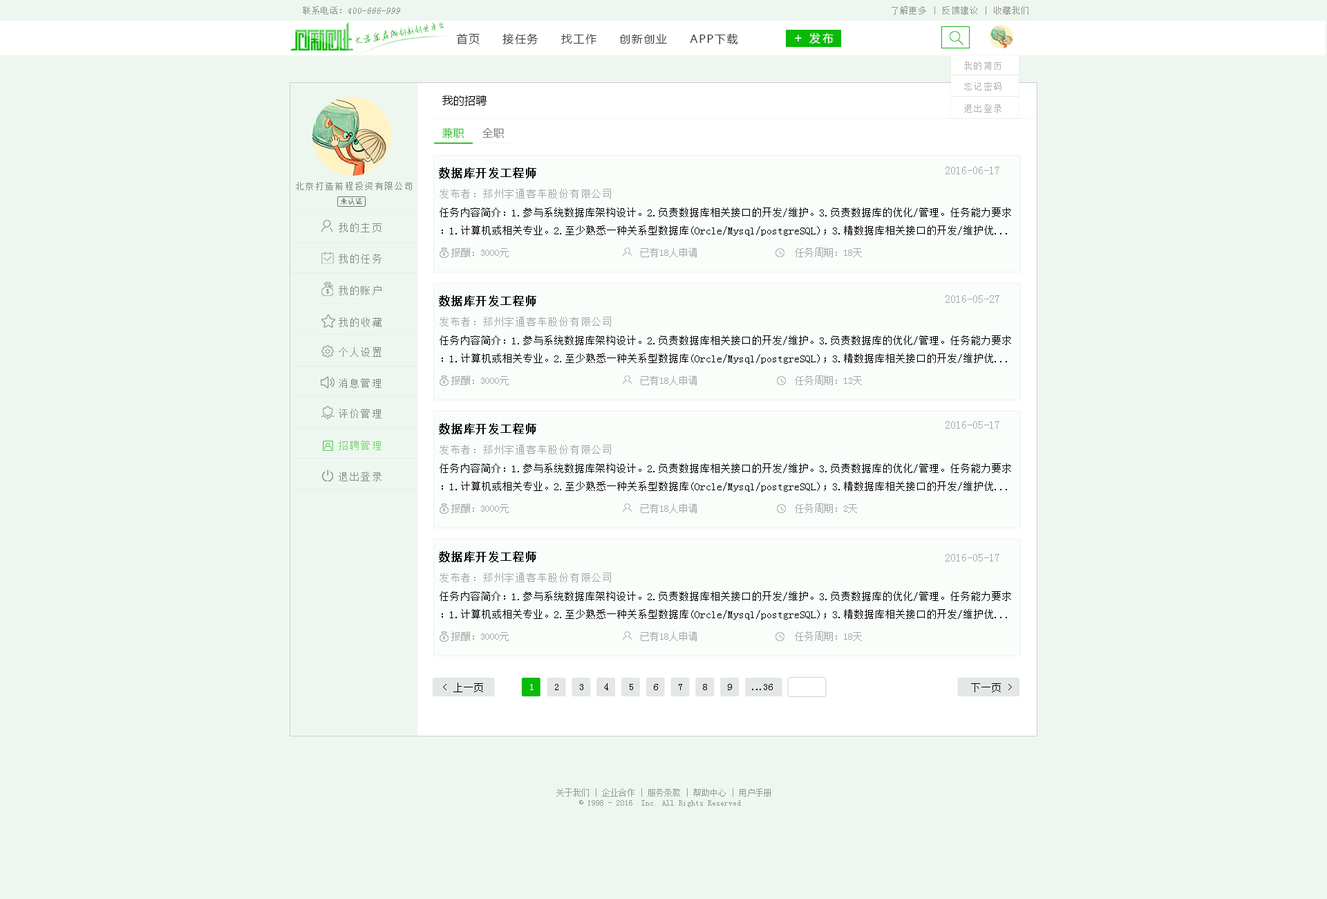
<style>
.page{position:relative;width:1327px;height:899px;background:#eef6f0}
.page>*{position:absolute;margin:0}
.t1{font:9.2px "SimSun";color:#959595;font-style:italic}
.t2{font:9.2px "SimSun";color:#959595}
.t3{font:8.3px "SimSun";letter-spacing:0.1em;color:#959494}
.t4{font:8.6px "AnJingCheng-Xing-2.0";letter-spacing:-0.01em;color:#09ba08}
.t5{font:9.6px "AnJingCheng-Xing-2.0";letter-spacing:-0.01em;color:#09ba08}
.t6{font:11.1px "MicrosoftYaHei";letter-spacing:0.1em;color:#3e3e3e}
.t7{font:12.9px "MicrosoftYaHei";letter-spacing:0.2em;color:#ffffff}
.t8{font:11.1px "MicrosoftYaHei";letter-spacing:0.2em;color:#ffffff}
.t9{font:9.2px "SimSun";letter-spacing:0.1em;color:#b2b2b2}
.t10{font:11.1px "MicrosoftYaHei";letter-spacing:0.01em;color:#000000}
.t11{font:11.1px "MicrosoftYaHei";letter-spacing:0.01em;color:#33c132}
.t12{font:11.1px "MicrosoftYaHei";letter-spacing:0.01em;color:#7e7e7e}
.t13{font:11.1px "SimSun";letter-spacing:0.05em;color:#030303;font-weight:bold}
.t14{font:11.1px "SimSun";color:#a4a4a4}
.t15{font:9.2px "SimSun";letter-spacing:0.1em;color:#888888}
.t16{font:7.4px "SimSun";color:#727472}
.t17{font:10.1px "SimSun";letter-spacing:0.05em;color:#a4a4a4}
.t18{font:10.1px "SimSun";color:#000000}
.t19{font:10.1px "SimSun";letter-spacing:0.1em;color:#888888}
.t20{font:9.7px "SimSun";color:#a4a4a4}
.t21{font:10.1px "SimSun";letter-spacing:0.1em;color:#7bd57b}
.t22{font:10px "SimSun";letter-spacing:0.05em;color:#000000}
.t23{font:10px "SimSun";letter-spacing:0.05em;color:#ffffff}
.t24{font:10px "SimSun";letter-spacing:-0.1em;color:#000000}
.t25{font:8.3px "SimSun";color:#999999}
</style>
<div class="page">
<p class="t1" style="left:303px;top:6px;width:97px;height:9px"><span class="t2">联系电话：</span>400-666-999</p>
<p class="t3" style="left:892px;top:6px;width:136px;height:9px">了解更多 | 反馈建议 | 收藏我们</p>
<p class="t4" style="left:355px;top:21px;width:89px;height:23px;rotate:-10deg"><span class="t5">大学生在线</span>创新创业平台</p>
<p class="t6" style="left:456px;top:33px;width:282px;height:12px">首页     接任务     找工作     创新创业     APP下载</p>
<p class="t7" style="left:795px;top:35px;width:7px;height:6px">+</p>
<p class="t8" style="left:809px;top:32px;width:25px;height:12px">发布</p>
<p class="t9" style="left:964px;top:62px;width:38px;height:8px">我的简历</p>
<p class="t9" style="left:964px;top:82px;width:38px;height:9px">忘记密码</p>
<p class="t10" style="left:442px;top:95px;width:45px;height:11px">我的招聘</p>
<p class="t9" style="left:964px;top:104px;width:38px;height:9px">退出登录</p>
<p class="t11" style="left:442px;top:127px;width:63px;height:12px">兼职     <span class="t12">全职</span></p>
<p class="t13" style="left:439px;top:167px;width:97px;height:11px">数据库开发工程师</p>
<p class="t14" style="left:946px;top:167px;width:53px;height:7px">2016-06-17</p>
<p class="t15" style="left:296px;top:182px;width:116px;height:8px">北京打造前程投资有限公司</p>
<p class="t16" style="left:341px;top:198px;width:21px;height:7px">未认证</p>
<p class="t17" style="left:440px;top:189px;width:171px;height:9px">发布者：郑州宇通客车股份有限公司</p>
<p class="t18" style="left:440px;top:207px;width:571px;height:29px">任务内容简介：1.参与系统数据库架构设计。2.负责数据库相关接口的开发/维护。3.负责数据库的优化/管理。任务能力要求<br>：1.计算机或相关专业。2.至少熟悉一种关系型数据库(Orcle/Mysql/postgreSQL)；3.精数据库相关接口的开发/维护优...</p>
<p class="t19" style="left:339px;top:223px;width:43px;height:9px">我的主页</p>
<p class="t19" style="left:339px;top:254px;width:43px;height:9px">我的任务</p>
<p class="t20" style="left:451px;top:247px;width:411px;height:10px">报酬：3000元                           已有18人申请                    任务周期：18天</p>
<p class="t19" style="left:339px;top:285px;width:43px;height:10px">我的账户</p>
<p class="t13" style="left:439px;top:295px;width:97px;height:11px">数据库开发工程师</p>
<p class="t14" style="left:946px;top:295px;width:53px;height:8px">2016-05-27</p>
<p class="t19" style="left:339px;top:317px;width:43px;height:10px">我的收藏</p>
<p class="t17" style="left:440px;top:317px;width:171px;height:9px">发布者：郑州宇通客车股份有限公司</p>
<p class="t18" style="left:440px;top:335px;width:571px;height:29px">任务内容简介：1.参与系统数据库架构设计。2.负责数据库相关接口的开发/维护。3.负责数据库的优化/管理。任务能力要求<br>：1.计算机或相关专业。2.至少熟悉一种关系型数据库(Orcle/Mysql/postgreSQL)；3.精数据库相关接口的开发/维护优...</p>
<p class="t19" style="left:339px;top:347px;width:43px;height:10px">个人设置</p>
<p class="t20" style="left:451px;top:375px;width:411px;height:10px">报酬：3000元                           已有18人申请                    任务周期：12天</p>
<p class="t19" style="left:339px;top:378px;width:43px;height:10px">消息管理</p>
<p class="t19" style="left:339px;top:408px;width:43px;height:10px">评价管理</p>
<p class="t13" style="left:439px;top:423px;width:97px;height:11px">数据库开发工程师</p>
<p class="t14" style="left:946px;top:421px;width:53px;height:8px">2016-05-17</p>
<p class="t21" style="left:339px;top:440px;width:43px;height:10px">招聘管理</p>
<p class="t17" style="left:440px;top:444px;width:171px;height:10px">发布者：郑州宇通客车股份有限公司</p>
<p class="t19" style="left:339px;top:471px;width:43px;height:10px">退出登录</p>
<p class="t18" style="left:440px;top:463px;width:571px;height:28px">任务内容简介：1.参与系统数据库架构设计。2.负责数据库相关接口的开发/维护。3.负责数据库的优化/管理。任务能力要求<br>：1.计算机或相关专业。2.至少熟悉一种关系型数据库(Orcle/Mysql/postgreSQL)；3.精数据库相关接口的开发/维护优...</p>
<p class="t20" style="left:451px;top:503px;width:406px;height:10px">报酬：3000元                           已有18人申请                    任务周期：2天</p>
<p class="t13" style="left:439px;top:551px;width:97px;height:11px">数据库开发工程师</p>
<p class="t14" style="left:946px;top:554px;width:53px;height:7px">2016-05-17</p>
<p class="t17" style="left:440px;top:572px;width:171px;height:10px">发布者：郑州宇通客车股份有限公司</p>
<p class="t18" style="left:440px;top:591px;width:571px;height:28px">任务内容简介：1.参与系统数据库架构设计。2.负责数据库相关接口的开发/维护。3.负责数据库的优化/管理。任务能力要求<br>：1.计算机或相关专业。2.至少熟悉一种关系型数据库(Orcle/Mysql/postgreSQL)；3.精数据库相关接口的开发/维护优...</p>
<p class="t20" style="left:451px;top:631px;width:411px;height:10px">报酬：3000元                           已有18人申请                    任务周期：18天</p>
<p class="t22" style="left:443px;top:682px;width:40px;height:10px">&lt; 上一页</p>
<p class="t23" style="left:530px;top:684px;width:4px;height:6px">1</p>
<p class="t22" style="left:555px;top:684px;width:3px;height:6px">2</p>
<p class="t22" style="left:580px;top:684px;width:3px;height:6px">3</p>
<p class="t22" style="left:604px;top:683px;width:4px;height:7px">4</p>
<p class="t22" style="left:630px;top:684px;width:3px;height:6px">5</p>
<p class="t22" style="left:654px;top:684px;width:4px;height:6px">6</p>
<p class="t22" style="left:679px;top:684px;width:3px;height:6px">7</p>
<p class="t22" style="left:703px;top:684px;width:4px;height:6px">8</p>
<p class="t22" style="left:728px;top:684px;width:4px;height:6px">9</p>
<p class="t24" style="left:752px;top:684px;width:21px;height:6px">...<span class="t22">36</span></p>
<p class="t22" style="left:971px;top:683px;width:41px;height:9px">下一页 &gt;</p>
<p class="t25" style="left:556px;top:788px;width:215px;height:19px;text-align:center">关于我们 | 企业合作 | 服务条款 | 帮助中心 | 用户手册<br>© 1998 - 2016  Inc. All Rights Reserved</p>
</div>
